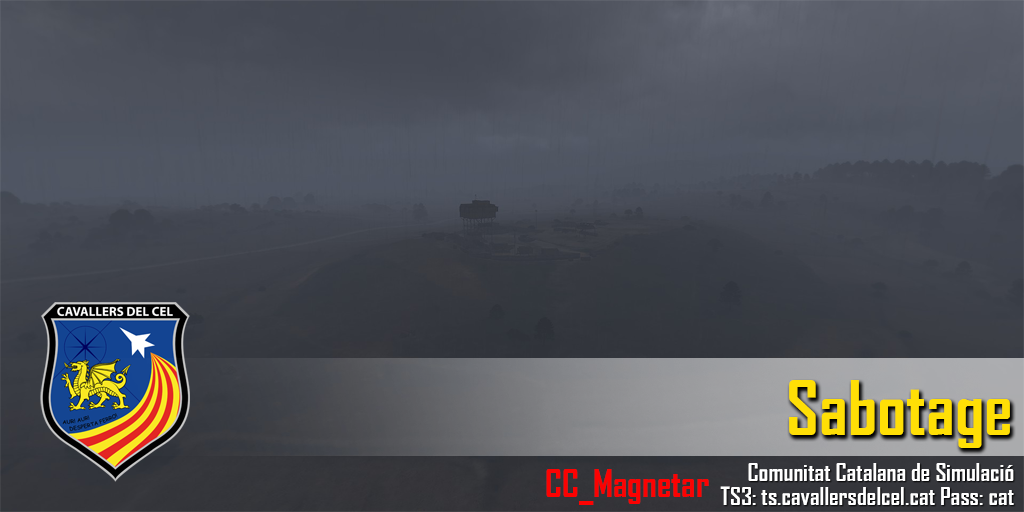
<style>
.page{position:relative;width:1024px;height:512px}
.page>*{position:absolute;margin:0}
.t1{font:72px "AgencyFB-Bold";color:#ffdf06}
.t2{font:36px "AgencyFB-Bold";color:#fc0202}
.t3{font:24px/24px "AgencyFB-Bold";color:#ffffff}
</style>
<div class="page">
<p class="t1" style="left:789px;top:380px;width:221px;height:68px">Sabotage</p>
<p class="t2" style="left:546px;top:469px;width:163px;height:36px">CC_Magnetar</p>
<p class="t3" style="left:720px;top:463px;width:294px;height:42px;text-align:right">Comunitat Catalana de Simulació<br>TS3: ts.cavallersdelcel.cat Pass: cat</p>
</div>
